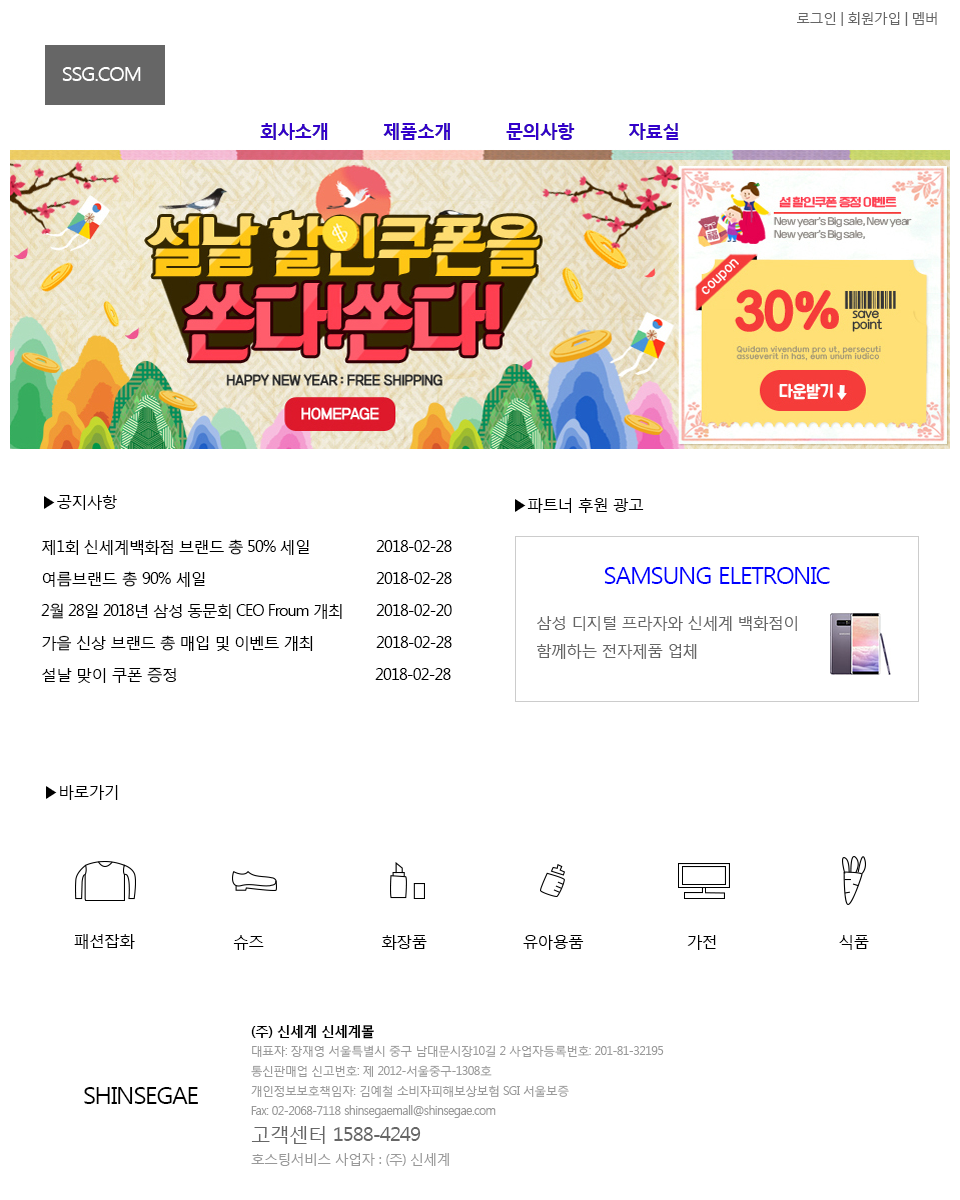
<style>
.page{position:relative;width:960px;height:1200px;background:#ffffff}
.page>*{position:absolute;margin:0}
.t1{font:14px "MalgunGothicRegular";letter-spacing:-0.05em;color:#666666}
.t2{font:20px "MalgunGothicRegular";letter-spacing:-0.05em;color:#ffffff}
.t3{font:18px "MalgunGothicBold";letter-spacing:-0.05em;color:#3300cc}
.t4{font:16px/32px "MalgunGothicRegular";letter-spacing:-0.05em;color:#000000}
.t5{font:16px/22.3px "MalgunGothicRegular";letter-spacing:-0.05em;color:#000000}
.t6{font:16px/32px "MalgunGothicRegular";letter-spacing:-0.07em;color:#000000}
.t7{font:16px "MalgunGothicRegular";letter-spacing:-0.05em;color:#000000}
.t8{font:24px "MalgunGothicRegular";letter-spacing:-0.05em;color:#0000ff}
.t9{font:16px/28px "MalgunGothicRegular";letter-spacing:-0.05em;color:#666666}
.t10{font:12px/20px "MalgunGothicRegular";letter-spacing:-0.05em;color:#999999}
.t11{font:14px/20px "MalgunGothicBold";letter-spacing:-0.05em;color:#000000}
.t12{font:20px/28px "MalgunGothicRegular";letter-spacing:-0.05em;color:#666666}
.t13{font:14px/28px "MalgunGothicRegular";letter-spacing:-0.05em;color:#999999}
.t14{font:24px "MalgunGothicRegular";letter-spacing:-0.05em;color:#000000}
</style>
<div class="page">
<p class="t1" style="left:797px;top:12px;width:140px;height:14px">로그인 | 회원가입 | 멤버</p>
<p class="t2" style="left:62px;top:67px;width:79px;height:14px">SSG.COM</p>
<p class="t3" style="left:260px;top:123px;width:419px;height:17px">회사소개          제품소개          문의사항          자료실</p>
<p class="t3" style="left:260px;top:123px;width:419px;height:17px">회사소개          제품소개          문의사항          자료실</p>
<p class="t4" style="left:41px;top:495px;width:411px;height:188px"><span class="t5">▶공지사항<br><br></span>제1회 신세계백화점 브랜드 총 50% 세일                 2018-02-28<br>여름브랜드 총 90% 세일                                   2018-02-28<br><span class="t6">2월 28일 2018년 삼성 동문회 CEO Froum 개최</span>       2018-02-20<br><span class="t6">가을 신상 브랜드 총 매입 및 이벤트 개최</span>            2018-02-28<br>설날 맞이 쿠폰 증정                                         2018-02-28</p>
<p class="t7" style="left:515px;top:498px;width:129px;height:15px">▶파트너 후원 광고</p>
<p class="t8" style="left:604px;top:567px;width:226px;height:17px">SAMSUNG ELETRONIC</p>
<p class="t9" style="left:537px;top:616px;width:260px;height:43px">삼성 디지털 프라자와 신세계 백화점이<br>함께하는 전자제품 업체</p>
<p class="t7" style="left:46px;top:785px;width:72px;height:15px">▶바로가기</p>
<p class="t7" style="left:74px;top:934px;width:61px;height:15px">패션잡화</p>
<p class="t7" style="left:233px;top:935px;width:31px;height:15px">슈즈</p>
<p class="t7" style="left:381px;top:935px;width:46px;height:15px">화장품</p>
<p class="t7" style="left:523px;top:935px;width:61px;height:15px">유아용품</p>
<p class="t7" style="left:687px;top:935px;width:29px;height:15px">가전</p>
<p class="t7" style="left:839px;top:935px;width:30px;height:15px">식품</p>
<p class="t10" style="left:251px;top:1025px;width:413px;height:141px"><span class="t11">(주) 신세계 신세계몰<br></span>대표자: 장재영 서울특별시 중구 남대문시장10길 2 사업자등록번호: 201-81-32195<br>통신판매업 신고번호: 제 2012-서울중구-1308호<br>개인정보보호책임자: 김예철 소비자피해보상보험 SGI 서울보증 <br>Fax: 02-2068-7118 shinsegaemall@shinsegae.com<br><span class="t12">고객센터 1588-4249<br></span><span class="t13">호스팅서비스 사업자 : (주) 신세계</span></p>
<p class="t14" style="left:84px;top:1087px;width:114px;height:17px">SHINSEGAE</p>
</div>
